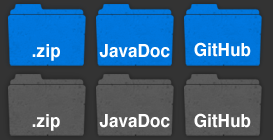
<style>
.page{position:relative;width:273px;height:140px}
.page>*{position:absolute;margin:0}
.t1{font:18px "Helvetica-Bold";color:#ffffff;scale:0.95 1}
</style>
<div class="page">
<p class="t1" style="left:32px;top:44px;width:28px;height:17px">.zip</p>
<p class="t1" style="left:99px;top:44px;width:71px;height:14px">JavaDoc</p>
<p class="t1" style="left:194px;top:42px;width:57px;height:15px">GitHub</p>
<p class="t1" style="left:194px;top:113px;width:57px;height:15px">GitHub</p>
<p class="t1" style="left:32px;top:114px;width:28px;height:17px">.zip</p>
<p class="t1" style="left:99px;top:114px;width:71px;height:14px">JavaDoc</p>
</div>
